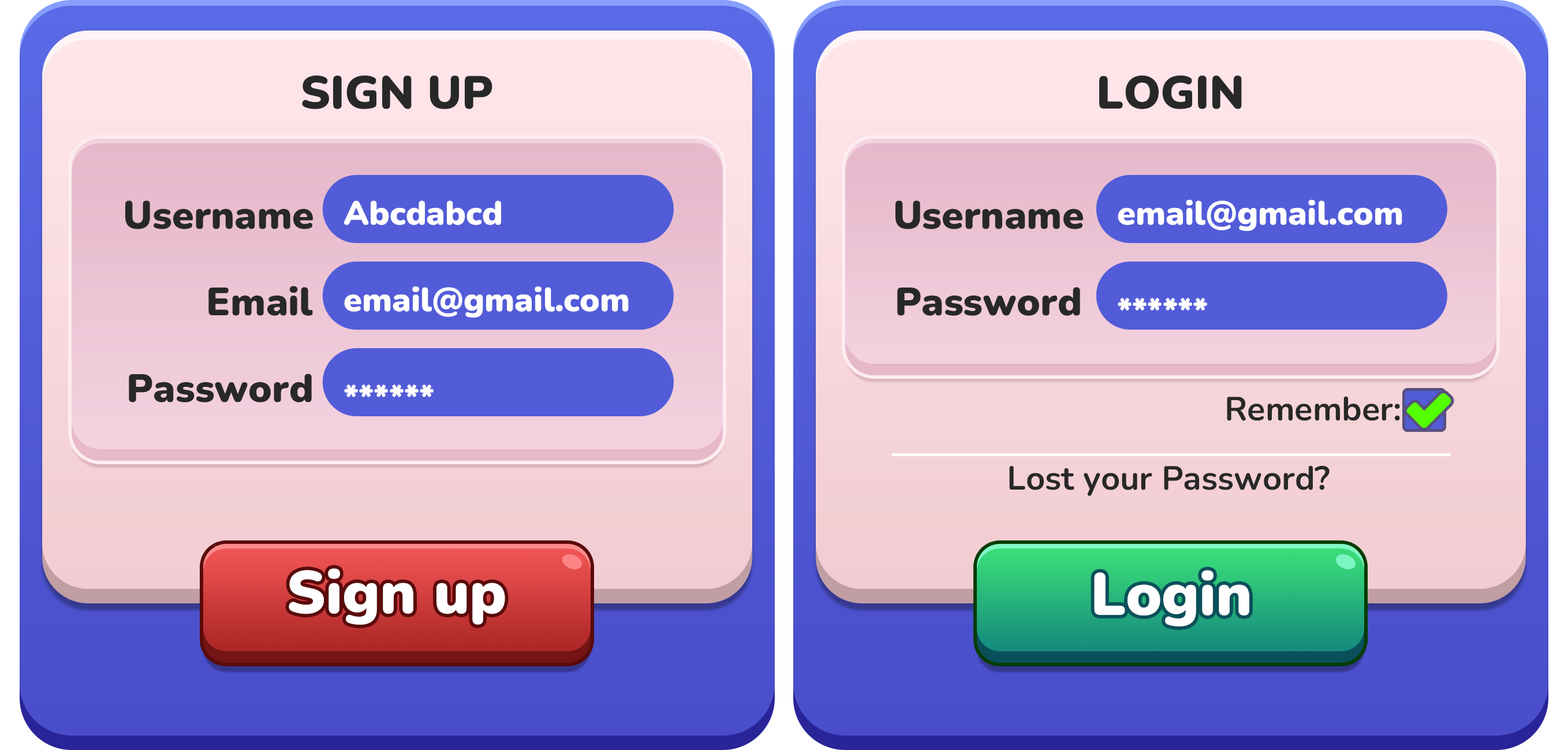
<style>
.page{position:relative;width:1568px;height:750px}
.page>*{position:absolute;margin:0}
.t1{font:46.2px "Nunito-Black";color:#282828}
.t2{font:39.3px "Nunito-Black";color:#282828}
.t3{font:33.4px "Nunito-Black";color:#ffffff}
.t4{font:33.4px "Nunito-Bold";color:#282828}
.t5{font:60px "Nunito-Black";color:#ffffff}
</style>
<div class="page">
<p class="t1" style="left:302px;top:75px;width:190px;height:34px">SIGN UP</p>
<p class="t1" style="left:1099px;top:75px;width:143px;height:34px">LOGIN</p>
<p class="t2" style="left:125px;top:200px;width:188px;height:29px">Username</p>
<p class="t3" style="left:344px;top:200px;width:157px;height:25px">Abcdabcd</p>
<p class="t2" style="left:895px;top:200px;width:188px;height:29px">Username</p>
<p class="t3" style="left:1118px;top:200px;width:284px;height:31px">email@gmail.com</p>
<p class="t2" style="left:208px;top:286px;width:105px;height:30px">Email</p>
<p class="t3" style="left:344px;top:286px;width:285px;height:32px">email@gmail.com</p>
<p class="t2" style="left:897px;top:287px;width:183px;height:29px">Password</p>
<p class="t3" style="left:1118px;top:298px;width:89px;height:13px">******</p>
<p class="t2" style="left:129px;top:374px;width:183px;height:28px">Password</p>
<p class="t3" style="left:344px;top:384px;width:90px;height:13px">******</p>
<p class="t4" style="left:1227px;top:396px;width:173px;height:25px">Remember:</p>
<p class="t4" style="left:1009px;top:465px;width:321px;height:31px">Lost your Password?</p>
<p class="t5" style="left:289px;top:568px;width:216px;height:57px">Sign up</p>
<p class="t5" style="left:1094px;top:570px;width:155px;height:56px">Login</p>
</div>
